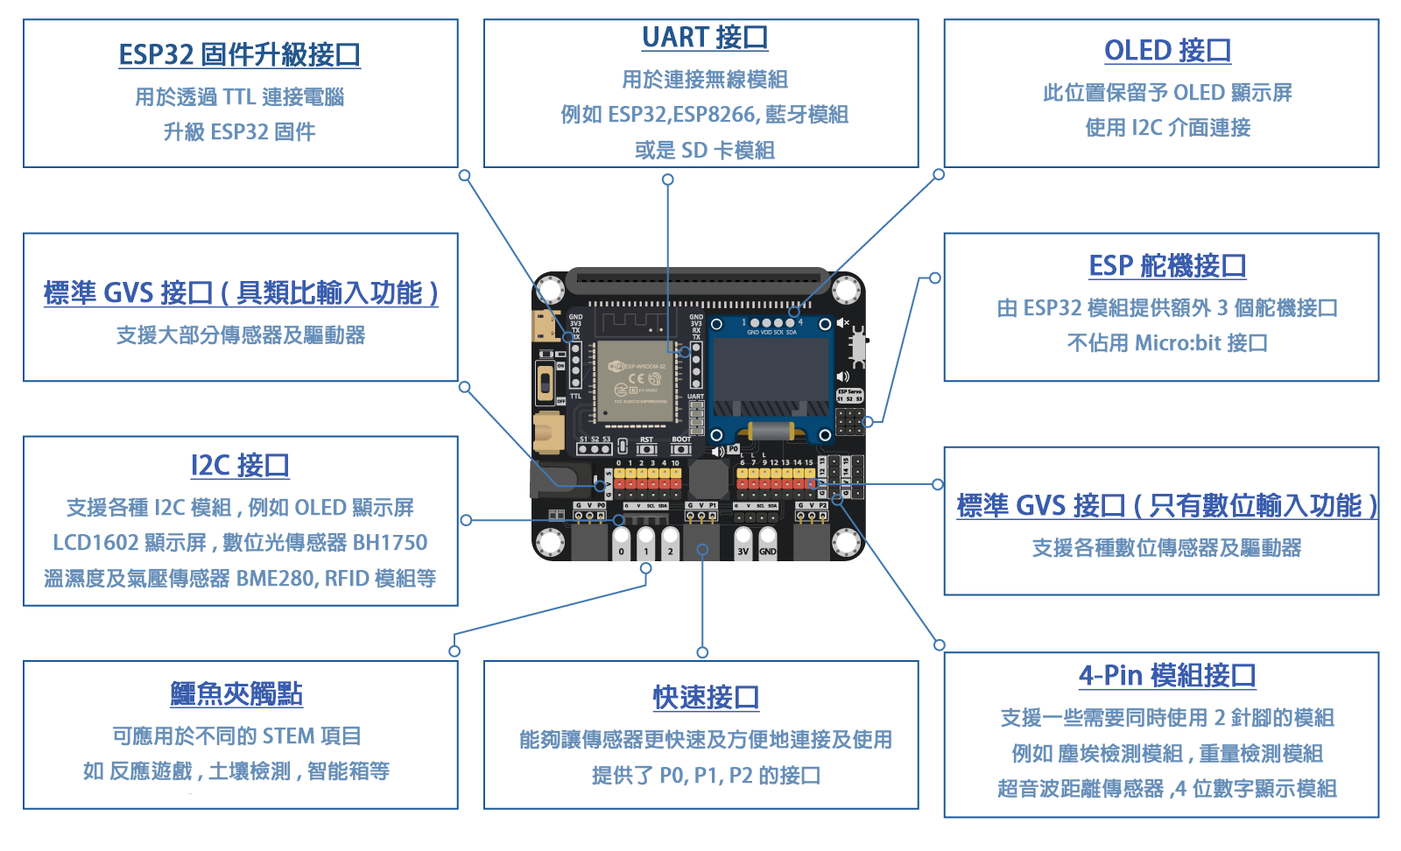
<style>
.page{position:relative;width:1401px;height:851px;background:#ffffff}
.page>*{position:absolute;margin:0}
.t1{font:20.3px "AdobeFanHeitiStd-Bold";color:#668fb9;font-weight:bold}
.t2{font:26px "AdobeFanHeitiStd-Bold";color:#22578d;font-weight:bold;text-decoration:underline}
.t3{font:26px "AdobeFanHeitiStd-Bold";color:#385dae;font-weight:bold;text-decoration:underline}
</style>
<div class="page">
<p class="t1" style="left:560px;top:24px;width:288px;height:136px;text-align:center"><span class="t2">UART 接口<br></span>用於連接無線模組<br>例如ESP32,ESP8266,藍牙模組<br>或是SD卡模組</p>
<p class="t1" style="left:118px;top:41px;width:244px;height:101px;text-align:center"><span class="t2">ESP32 固件升級接口<br></span>用於透過TTL連接電腦<br>升級ESP32固件</p>
<p class="t1" style="left:1043px;top:37px;width:249px;height:100px;text-align:center"><span class="t3">OLED 接口<br></span>此位置保留予OLED顯示屏<br>使用I2C介面連接</p>
<p class="t1" style="left:998px;top:252px;width:339px;height:101px;text-align:center"><span class="t3">ESP 舵機接口<br></span>由ESP32模組提供額外3個舵機接口<br>不佔用Micro:bit接口</p>
<p class="t3" style="left:43px;top:279px;width:397px;height:66px;text-align:center">標準GVS接口(具類比輸入功能)<br><span class="t1">支援大部分傳感器及驅動器</span></p>
<p class="t1" style="left:44px;top:452px;width:392px;height:137px;text-align:center"><span class="t3">I2C接口<br></span>支援各種I2C模組,例如OLED顯示屏<br>LCD1602顯示屏,數位光傳感器BH1750<br>溫濕度及氣壓傳感器 BME280, RFID模組等</p>
<p class="t3" style="left:956px;top:492px;width:423px;height:66px;text-align:center">標準GVS接口(只有數位輸入功能)<br><span class="t1">支援各種數位傳感器及驅動器</span></p>
<p class="t1" style="left:997px;top:662px;width:340px;height:137px;text-align:center"><span class="t3">4-Pin 模組接口<br></span>支援一些需要同時使用2針腳的模組<br>例如 塵埃檢測模組,重量檢測模組<br>超音波距離傳感器,4位數字顯示模組</p>
<p class="t1" style="left:83px;top:680px;width:307px;height:102px;text-align:center"><span class="t3">鱷魚夾觸點<br></span>可應用於不同的STEM項目<br>如 反應遊戲,土壤檢測,智能箱等</p>
<p class="t1" style="left:519px;top:684px;width:372px;height:102px;text-align:center"><span class="t3">快速接口<br></span>能夠讓傳感器更快速及方便地連接及使用<br>提供了P0, P1, P2的接口</p>
</div>
